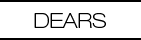
<style>
.page{position:relative;width:141px;height:40px;background:#ffffff}
.page>*{position:absolute;margin:0}
.t1{font:20.8px "HelveticaNeueLTPro-ThEx";color:#000000}
</style>
<div class="page">
<p class="t1" style="left:34px;top:13px;width:72px;height:15px">DEARS</p>
</div>
